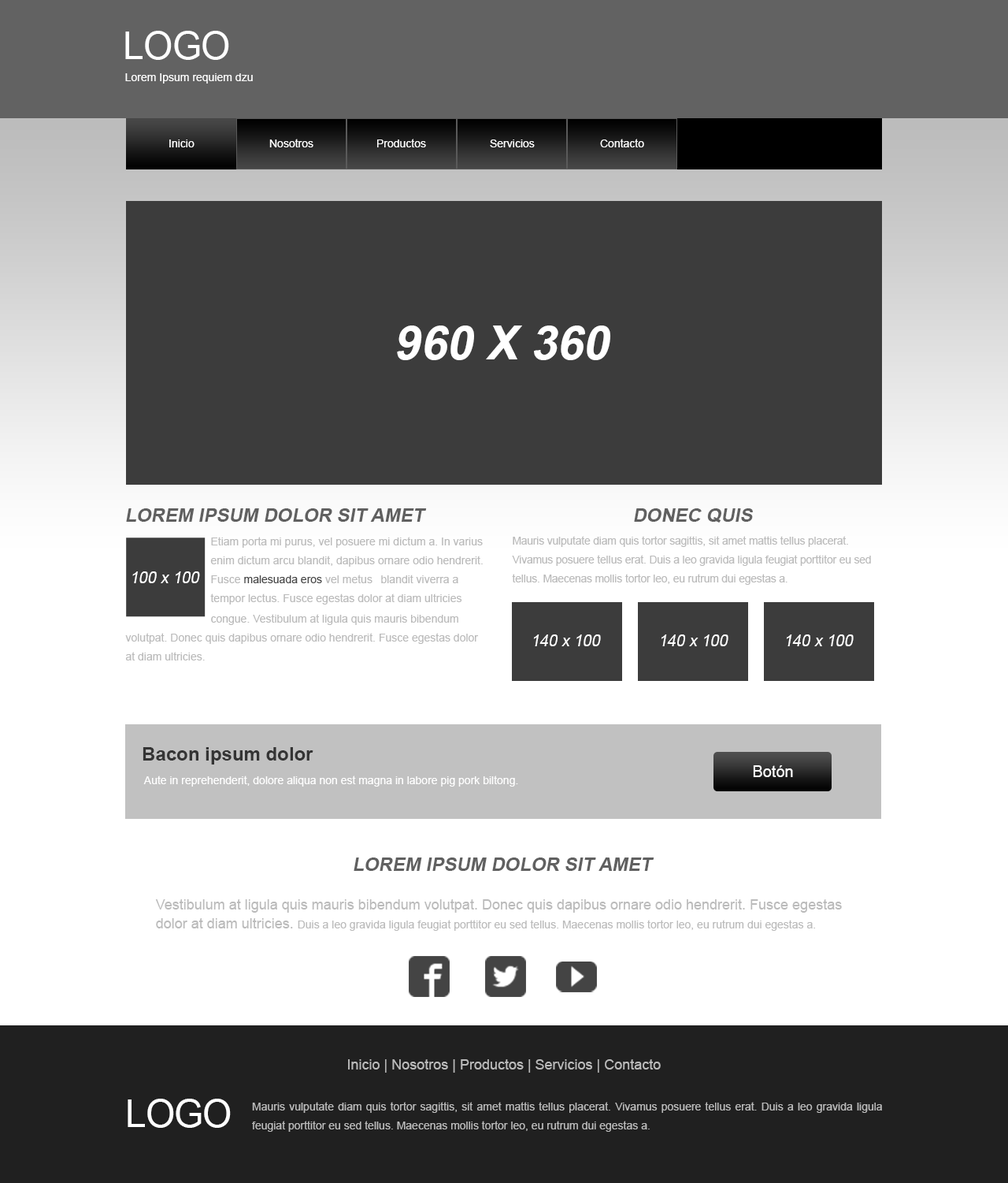
<style>
.page{position:relative;width:1008px;height:1183px;background:#ffffff}
.page>*{position:absolute;margin:0}
.t1{font:37.8px "ArialMT";letter-spacing:-0.02em;color:#ffffff}
.t2{font:11px "ArialMT";color:#ffffff}
.t3{font:47.3px "Arial-BoldMT";color:#ffffff;text-transform:uppercase;font-style:italic}
.t4{font:18.9px "Arial-BoldMT";color:#606060;text-transform:uppercase;font-style:italic}
.t5{font:11px/18.9px "ArialMT";color:#bbbbbb;scale:0.97 1}
.t6{font:15.8px "ArialMT";color:#ffffff;font-style:italic}
.t7{font:18.9px "Arial-BoldMT";color:#353535}
.t8{font:15.8px "ArialMT";color:#ffffff}
.t9{font:14.2px/18.9px "ArialMT";color:#bbbbbb}
.t10{font:11px/18.9px "ArialMT";color:#bbbbbb}
.t11{font:14.2px "ArialMT";color:#bbbbbb}
</style>
<div class="page">
<p class="t1" style="left:125px;top:31px;width:104px;height:29px">LOGO</p>
<p class="t2" style="left:125px;top:73px;width:128px;height:11px">Lorem Ipsum requiem dzu</p>
<p class="t2" style="left:169px;top:139px;width:26px;height:8px">Inicio</p>
<p class="t2" style="left:269px;top:139px;width:45px;height:8px">Nosotros</p>
<p class="t2" style="left:377px;top:139px;width:49px;height:8px">Productos</p>
<p class="t2" style="left:490px;top:139px;width:45px;height:8px">Servicios</p>
<p class="t2" style="left:600px;top:139px;width:44px;height:8px">Contacto</p>
<p class="t3" style="left:397px;top:325px;width:214px;height:35px">960 x 360</p>
<p class="t4" style="left:126px;top:508px;width:301px;height:14px">Lorem ipsum dolor sit amet</p>
<p class="t4" style="left:634px;top:508px;width:119px;height:14px">Donec quis</p>
<p class="t5" style="left:512px;top:536px;width:359px;height:49px">Mauris vulputate diam quis tortor sagittis, sit amet mattis tellus placerat. Vivamus posuere tellus erat. Duis a leo gravida ligula feugiat porttitor eu sed tellus. Maecenas mollis tortor leo, eu rutrum dui egestas a.</p>
<p class="t6" style="left:132px;top:571px;width:68px;height:12px">100 x 100</p>
<p class="t6" style="left:533px;top:634px;width:68px;height:12px">140 x 100</p>
<p class="t6" style="left:661px;top:634px;width:68px;height:12px">140 x 100</p>
<p class="t6" style="left:786px;top:634px;width:68px;height:12px">140 x 100</p>
<p class="t7" style="left:143px;top:747px;width:171px;height:17px">Bacon ipsum dolor</p>
<p class="t8" style="left:753px;top:765px;width:40px;height:12px">Botón</p>
<p class="t2" style="left:143px;top:775px;width:375px;height:11px">Aute in reprehenderit, dolore aliqua non est magna in labore pig pork biltong.</p>
<p class="t4" style="left:354px;top:857px;width:301px;height:14px">Lorem ipsum dolor sit amet</p>
<p class="t9" style="left:155px;top:899px;width:687px;height:31px">Vestibulum at ligula quis mauris bibendum volutpat. Donec quis dapibus ornare odio hendrerit. Fusce egestas dolor at diam ultricies. <span class="t10">Duis a leo gravida ligula feugiat porttitor eu sed tellus. Maecenas mollis tortor leo, eu rutrum dui egestas a.</span></p>
<p class="t11" style="left:348px;top:1059px;width:313px;height:13px">Inicio | Nosotros | Productos | Servicios | Contacto</p>
<p class="t1" style="left:128px;top:1098px;width:103px;height:29px">LOGO</p>
<p class="t10" style="left:252px;top:1101px;width:630px;height:30px;text-align:justify">Mauris vulputate diam quis tortor sagittis, sit amet mattis tellus placerat. Vivamus posuere tellus erat. Duis a leo gravida ligula feugiat porttitor eu sed tellus. Maecenas mollis tortor leo, eu rutrum dui egestas a.</p>
</div>
